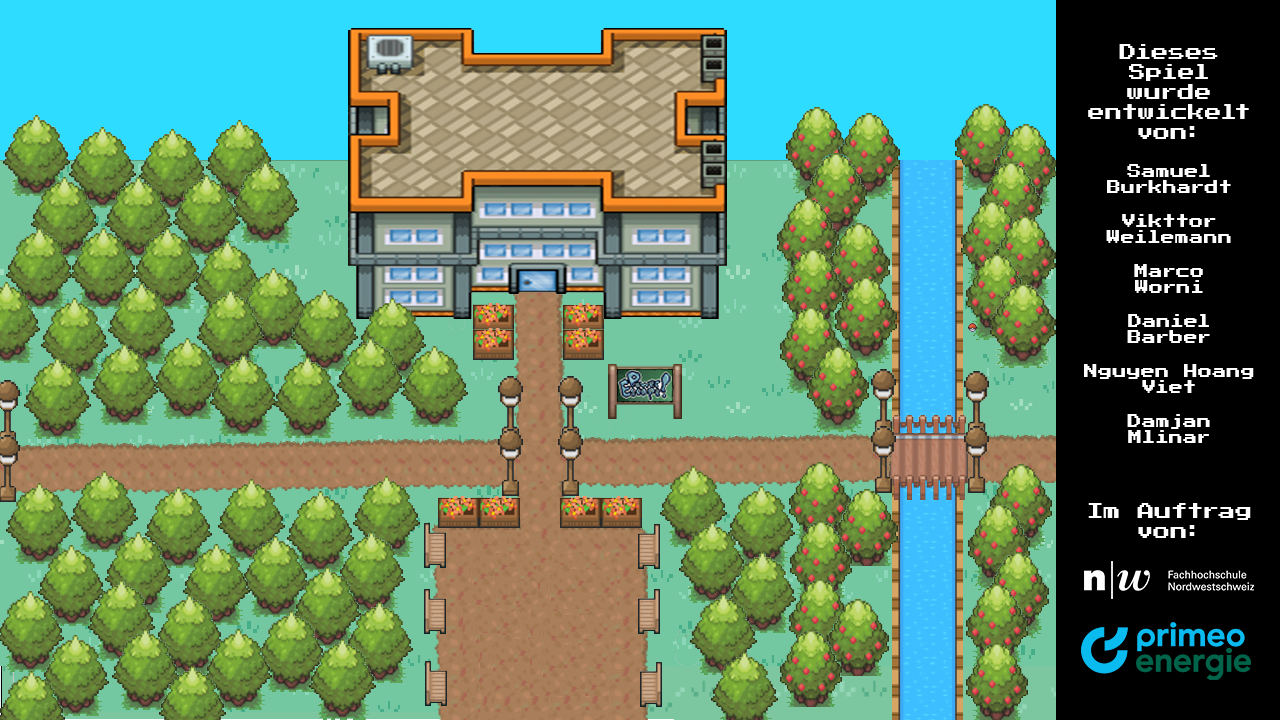
<style>
.page{position:relative;width:1280px;height:720px}
.page>*{position:absolute;margin:0}
.t1{font:13.9px "PressStart2P-Regular";letter-spacing:0.02em;color:#ffffff}
.t2{font:16.7px "PressStart2P-Regular";letter-spacing:0.02em;color:#ffffff}
</style>
<div class="page">
<p class="t1" style="left:1084px;top:44px;width:170px;height:494px;text-align:center"><span class="t2">Dieses Spiel wurde entwickelt von:<br><br></span>Samuel<br>Burkhardt<br><br>Vikttor Weilemann<br><br>Marco<br>Worni<br><br>Daniel<br>Barber<br><br>Nguyen Hoang<br>Viet<br><br>Damjan<br>Mlinar<br><br><br><br><span class="t2">Im Auftrag von:</span></p>
</div>
